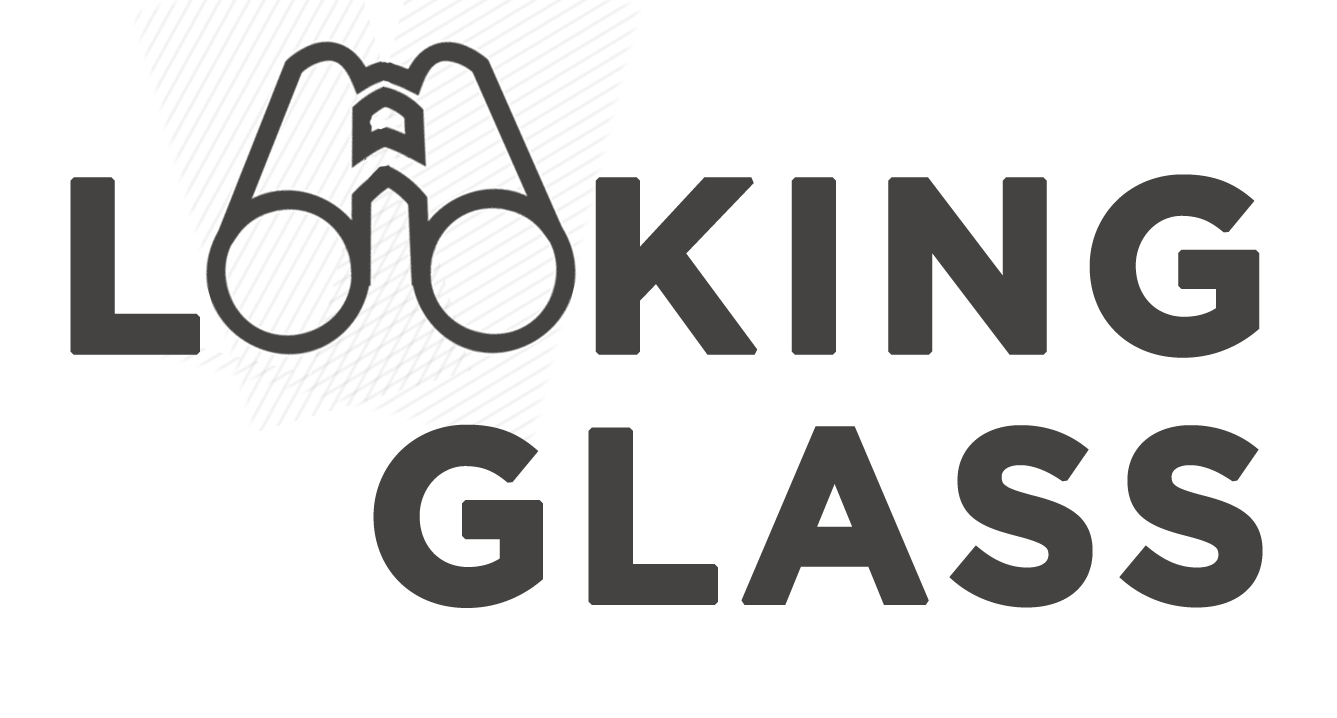
<style>
.page{position:relative;width:1337px;height:718px;background:#ffffff}
.page>*{position:absolute;margin:0}
.t1{font:243.8px/250.2px "GothamBold";letter-spacing:0.04em;color:#444341;text-transform:uppercase;font-weight:bold}
</style>
<div class="page">
<p class="t1" style="left:70px;top:174px;width:1193px;height:434px;text-align:right">L    king<br>Glass</p>
</div>
